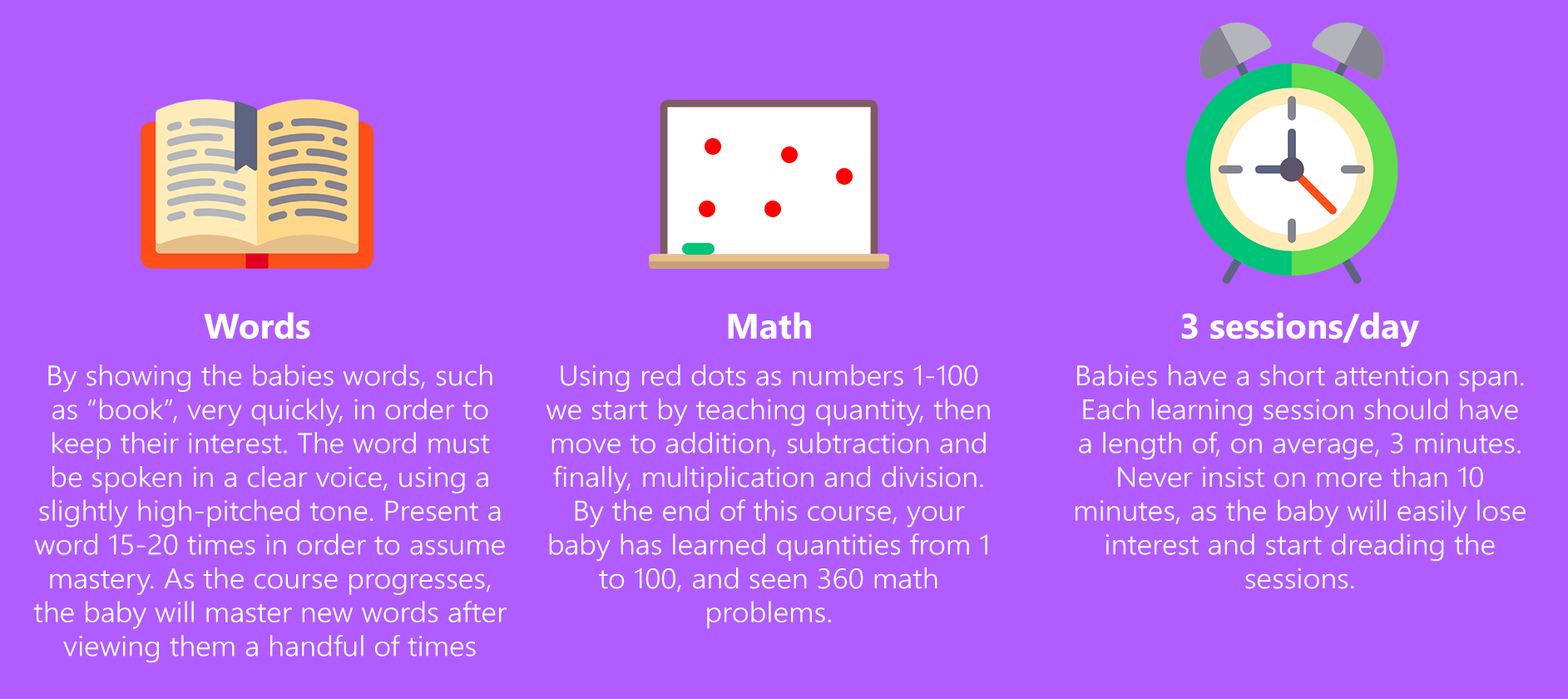
<style>
.page{position:relative;width:1568px;height:699px;background:#b05cff}
.page>*{position:absolute;margin:0}
.t1{font:35.2px "NirmalaUI-Bold";color:#ffffff}
.t2{font:28.2px "NirmalaUI-Semilight";color:#ffffff;scale:1.07 1}
</style>
<div class="page">
<p class="t1" style="left:204px;top:312px;width:106px;height:27px">Words</p>
<p class="t1" style="left:728px;top:312px;width:83px;height:27px">Math</p>
<p class="t1" style="left:1181px;top:312px;width:238px;height:35px">3 sessions/day</p>
<p class="t2" style="left:33px;top:364px;width:474px;height:299px;text-align:center">By showing the babies words, such as “book”, very quickly, in order to keep their interest. The word must be spoken in a clear voice, using a slightly high-pitched tone. Present a word 15-20 times in order to assume mastery. As the course progresses, the baby will master new words after viewing them a handful of times</p>
<p class="t2" style="left:546px;top:364px;width:444px;height:265px;text-align:center">Using red dots as numbers 1-100 we start by teaching quantity, then move to addition, subtraction and finally, multiplication and division. By the end of this course, your baby has learned quantities from 1 to 100, and seen 360 math problems.</p>
<p class="t2" style="left:1076px;top:364px;width:450px;height:225px;text-align:center">Babies have a short attention span. Each learning session should have a length of, on average, 3 minutes. Never insist on more than 10 minutes, as the baby will easily lose interest and start dreading the sessions.</p>
</div>
